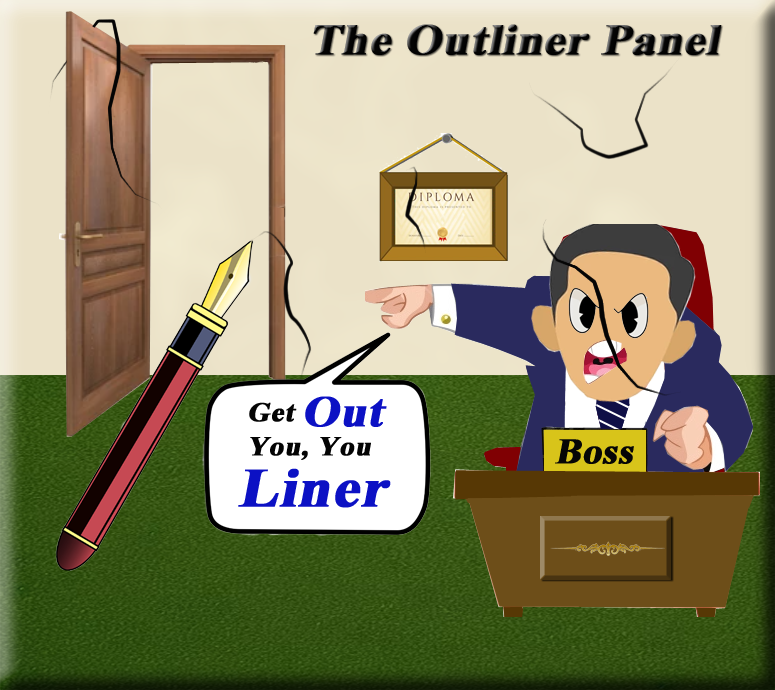
<style>
.page{position:relative;width:775px;height:690px}
.page>*{position:absolute;margin:0}
.t1{font:43.7px "TimesNewRomanPS-BoldMT";color:#040404;font-weight:bold;font-style:italic;scale:1.08 1}
.t2{font:43.7px "TimesNewRomanPS-BoldMT";color:#0c11c4;font-weight:bold;font-style:italic;scale:1.08 1}
.t3{font:27px "TimesNewRomanPS-BoldMT";color:#040404;font-weight:bold;font-style:italic;scale:1.08 1}
.t4{font:54.9px "TimesNewRomanPS-BoldMT";color:#0c11c4;font-weight:bold;font-style:italic;scale:1.08 1}
</style>
<div class="page">
<p class="t1" style="left:313px;top:24px;width:409px;height:31px">The Outliner Panel</p>
<p class="t2" style="left:305px;top:396px;width:82px;height:31px">Out</p>
<p class="t3" style="left:249px;top:402px;width:48px;height:20px">Get</p>
<p class="t3" style="left:250px;top:437px;width:121px;height:23px">You, You</p>
<p class="t4" style="left:238px;top:468px;width:153px;height:40px">Liner</p>
</div>
